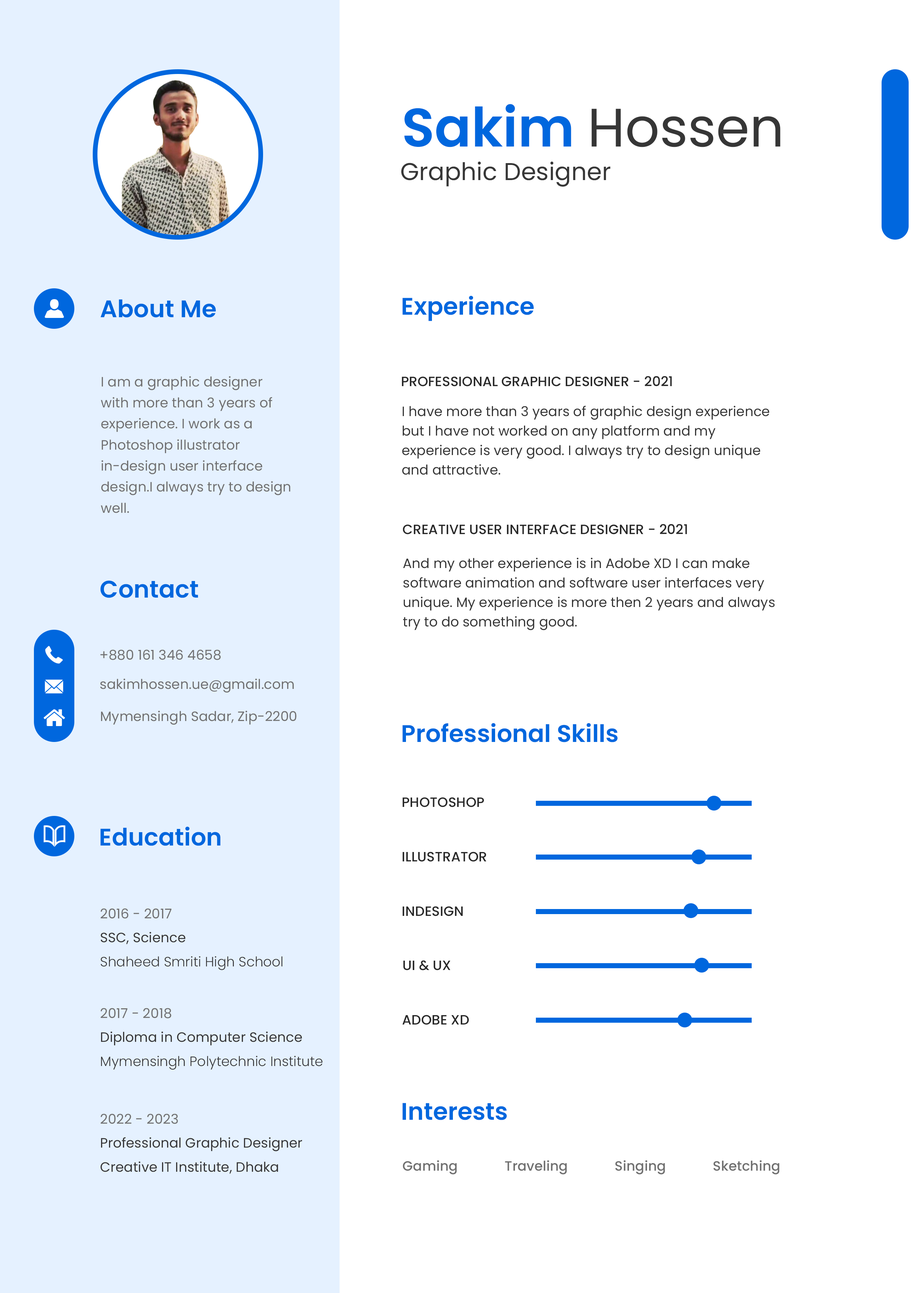
<style>
.page{position:relative;width:922px;height:1293px;background:#ffffff}
.page>*{position:absolute;margin:0}
.t1{font:54.1px "Poppins-Regular";color:#363636}
.t2{font:54.1px "Poppins-SemiBold";color:#0067de}
.t3{font:24.3px "Poppins-Regular";color:#363636}
.t4{font:24.1px "Poppins-SemiBold";color:#0067de}
.t5{font:13.5px/21.1px "Poppins-Regular";color:#707070}
.t6{font:13.5px "Poppins-Medium";color:#282828;text-transform:uppercase}
.t7{font:13.5px/19.5px "Poppins-Regular";color:#353535}
.t8{font:13.5px "Poppins-Regular";color:#707070}
.t9{font:13.5px/24.1px "Poppins-Light";color:#363636}
.t10{font:13.5px/24.1px "Poppins-Regular";color:#707070}
.t11{font:13.5px/24.1px "Poppins-Regular";color:#363636}
.t12{font:13.5px "Poppins-Medium";color:#707070}
</style>
<div class="page">
<p class="t1" style="left:404px;top:104px;width:377px;height:43px"><span class="t2">Sakim </span>Hossen</p>
<p class="t3" style="left:401px;top:161px;width:210px;height:26px">Graphic Designer</p>
<p class="t4" style="left:100px;top:299px;width:116px;height:19px">About Me</p>
<p class="t4" style="left:402px;top:296px;width:132px;height:25px">Experience</p>
<p class="t5" style="left:101px;top:376px;width:190px;height:137px">I am a graphic designer with more than 3 years of experience. I work as a Photoshop illustrator in-design user interface design.I always try to design well.</p>
<p class="t6" style="left:402px;top:376px;width:270px;height:11px">Professional Graphic Designer - 2021</p>
<p class="t7" style="left:402px;top:406px;width:367px;height:69px">I have more than 3 years of graphic design experience but I have not worked on any platform and my experience is very good. I always try to design unique and attractive.</p>
<p class="t6" style="left:403px;top:524px;width:284px;height:11px">creative user interface designer - 2021</p>
<p class="t7" style="left:403px;top:558px;width:372px;height:72px">And my other experience is in Adobe XD I can make software animation and software user interfaces very unique. My experience is more then 2 years and always try to do something good.</p>
<p class="t4" style="left:100px;top:580px;width:98px;height:18px">Contact</p>
<p class="t8" style="left:100px;top:650px;width:121px;height:10px">+880 161 346 4658</p>
<p class="t8" style="left:100px;top:679px;width:194px;height:14px">sakimhossen.ue@gmail.com</p>
<p class="t8" style="left:101px;top:711px;width:196px;height:14px">Mymensingh Sadar, Zip-2200</p>
<p class="t4" style="left:402px;top:723px;width:216px;height:19px">Professional Skills</p>
<p class="t6" style="left:402px;top:797px;width:82px;height:10px">photoshop</p>
<p class="t4" style="left:100px;top:826px;width:121px;height:20px">Education</p>
<p class="t6" style="left:402px;top:852px;width:85px;height:10px">illustrator</p>
<p class="t9" style="left:101px;top:908px;width:182px;height:62px"><span class="t10">2016 - 2017<br></span><span class="t11">SSC, Science<br></span>Shaheed Smriti High School</p>
<p class="t6" style="left:402px;top:906px;width:61px;height:10px">indesign</p>
<p class="t6" style="left:403px;top:960px;width:47px;height:10px">UI &amp; UX</p>
<p class="t9" style="left:101px;top:1008px;width:222px;height:62px"><span class="t10">2017 - 2018<br></span><span class="t11">Diploma in Computer Science<br></span>Mymensingh Polytechnic Institute</p>
<p class="t6" style="left:402px;top:1015px;width:67px;height:10px">Adobe Xd</p>
<p class="t4" style="left:402px;top:1103px;width:105px;height:17px">Interests</p>
<p class="t11" style="left:100px;top:1114px;width:202px;height:60px"><span class="t10">2022 - 2023<br></span>Professional Graphic Designer <br>Creative IT Institute, Dhaka</p>
<p class="t12" style="left:403px;top:1160px;width:54px;height:15px">Gaming</p>
<p class="t12" style="left:505px;top:1160px;width:62px;height:15px">Traveling</p>
<p class="t12" style="left:615px;top:1160px;width:50px;height:15px">Singing</p>
<p class="t12" style="left:714px;top:1160px;width:66px;height:15px">Sketching</p>
</div>
